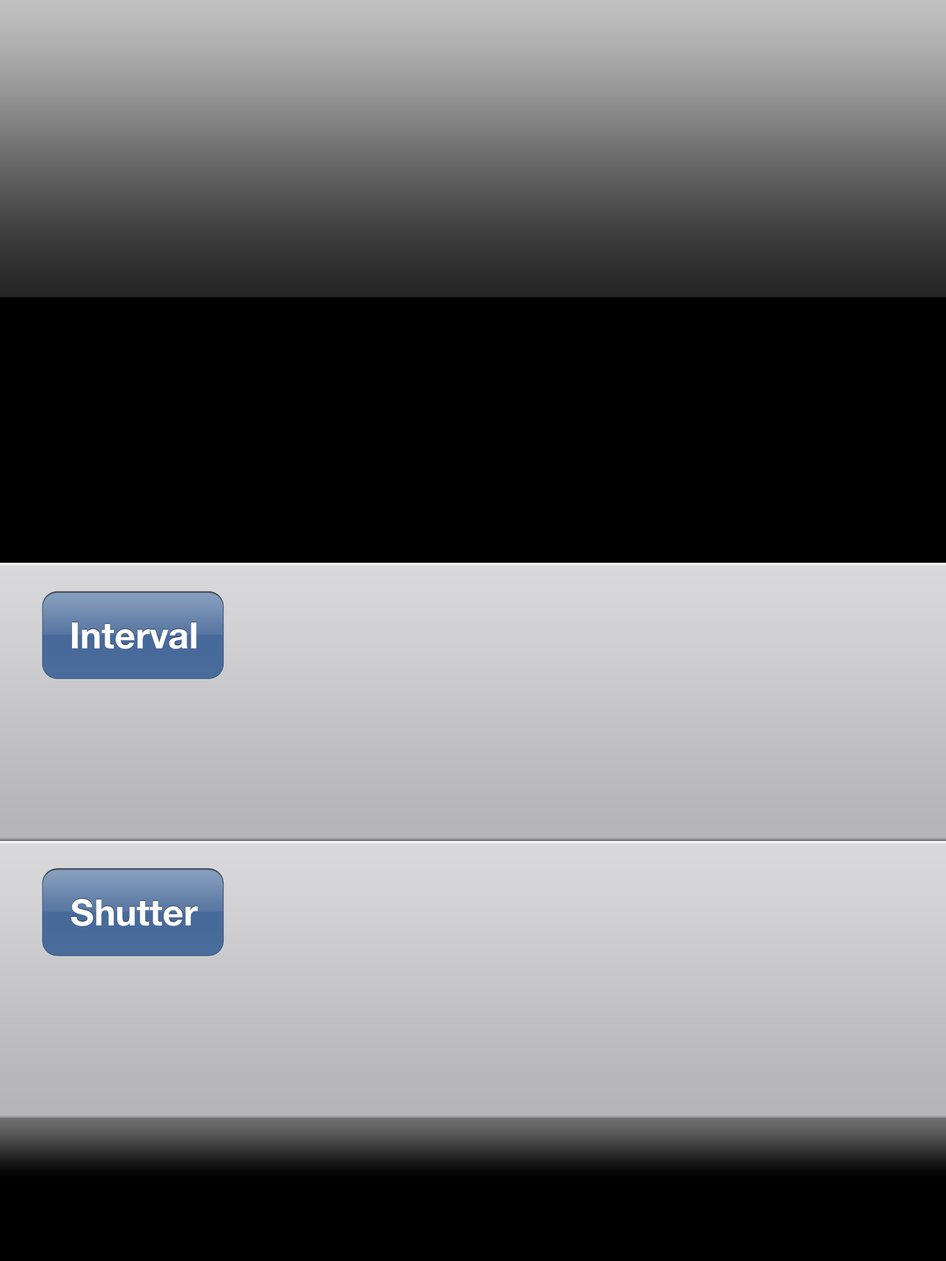
<style>
.page{position:relative;width:946px;height:1261px;background:#000000}
.page>*{position:absolute;margin:0}
.t1{font:36.3px "HelveticaNeue-Bold";color:#ffffff}
</style>
<div class="page">
<p class="t1" style="left:72px;top:622px;width:124px;height:27px">Interval</p>
<p class="t1" style="left:71px;top:898px;width:127px;height:28px">Shutter</p>
</div>
